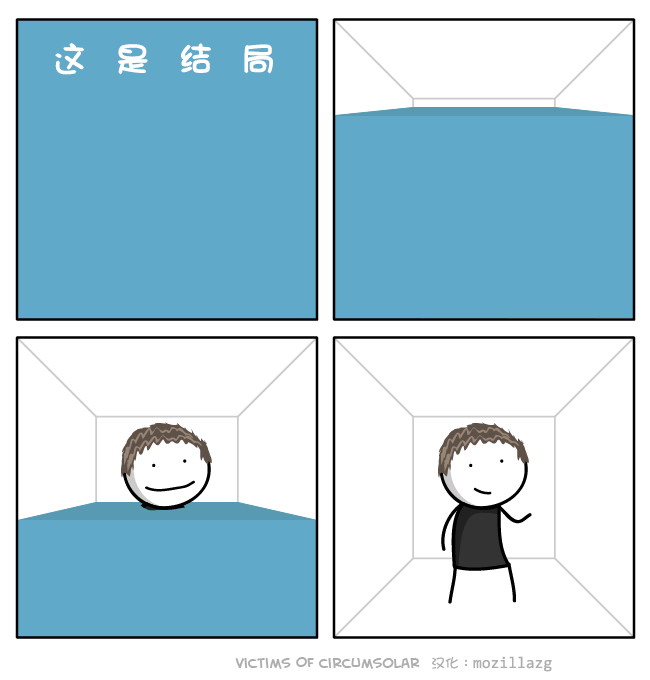
<style>
.page{position:relative;width:650px;height:680px;background:#ffffff}
.page>*{position:absolute;margin:0}
.t1{font:34px "DFGirl";letter-spacing:0.82em;color:#ffffff;font-weight:bold}
</style>
<div class="page">
<p class="t1" style="left:55px;top:43px;width:218px;height:32px">这是结局</p>
</div>
